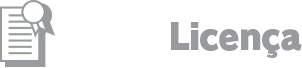
<style>
.page{position:relative;width:302px;height:68px;background:#ffffff}
.page>*{position:absolute;margin:0}
.t1{font:36px "RodinPro-UB";letter-spacing:-0.039em;color:#989a9d;scale:0.95 1}
</style>
<div class="page">
<p class="t1" style="left:171px;top:22px;width:131px;height:36px">Licença</p>
</div>
